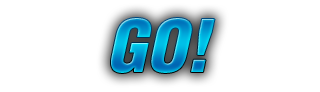
<style>
.page{position:relative;width:320px;height:92px;background:#ffffff}
.page>*{position:absolute;margin:0}
.t1{font:71.1px "HelveticaLTStd-BlkCondObl"}
</style>
<div class="page">
<p class="t1" style="left:111px;top:18px;width:104px;height:55px">GO!</p>
</div>
